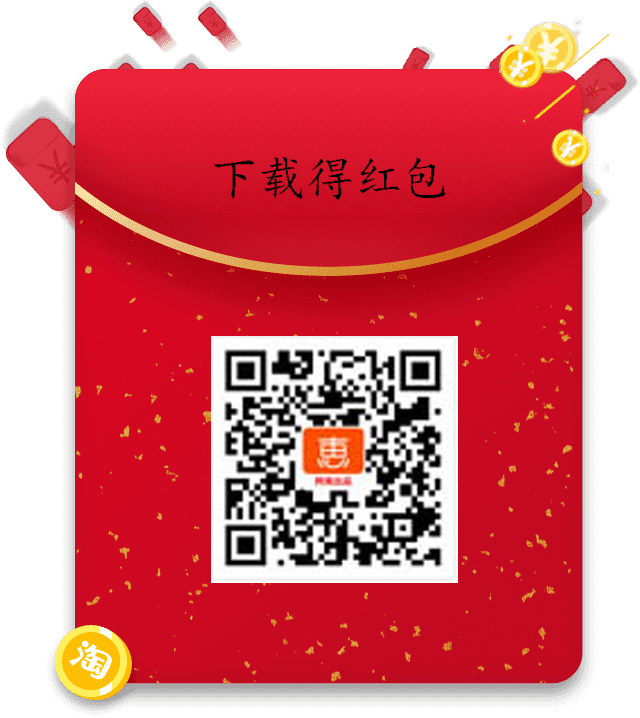
<style>
.page{position:relative;width:640px;height:718px;background:#ffffff}
.page>*{position:absolute;margin:0}
.t1{font:48px "¿¬Ìå";color:#000000}
</style>
<div class="page">
<p class="t1" style="left:214px;top:156px;width:232px;height:44px">下载得红包</p>
</div>
